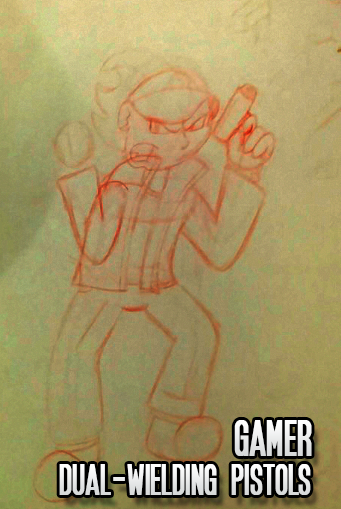
<style>
.page{position:relative;width:341px;height:509px}
.page>*{position:absolute;margin:0}
.t1{font:70px "SFMoviePoster";color:#eaecec;font-weight:bold}
.t2{font:60px "SFMoviePoster";color:#ebeced;font-weight:bold}
</style>
<div class="page">
<p class="t1" style="left:234px;top:420px;width:78px;height:36px">gamer</p>
<p class="t2" style="left:59px;top:464px;width:252px;height:31px">dual-wielding pistols</p>
</div>
